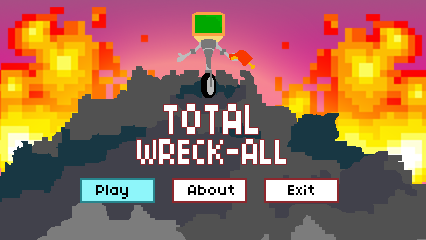
<style>
.page{position:relative;width:426px;height:240px}
.page>*{position:absolute;margin:0}
.t1{font:39px/30px "04b03";color:#ffffff;scale:0.77 1}
.t2{font:46.8px/30px "04b03";color:#ffffff;scale:0.77 1}
.t3{font:16px "04b03";color:#000000}
</style>
<div class="page">
<p class="t1" style="left:137px;top:104px;width:149px;height:60px;text-align:center"><span class="t2">TOTAL<br></span>WRECK-ALL</p>
<p class="t3" style="left:96px;top:185px;width:218px;height:14px">Play       About     Exit</p>
</div>
